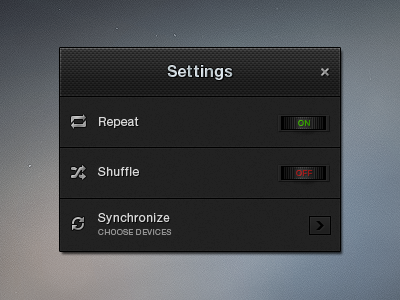
<style>
.page{position:relative;width:400px;height:300px;background:#222222}
.page>*{position:absolute;margin:0}
.t1{font:16px "HelveticaNeue-Bold";letter-spacing:0.02em;color:#ced6dc}
.t2{font:12px "HelveticaNeue-Roman";letter-spacing:0.06em;color:#d8d8d8}
.t3{font:8px "HelveticaNeue-Roman";letter-spacing:0.02em;color:#37a100}
.t4{font:12px "HelveticaNeue-Roman";letter-spacing:0.02em;color:#d8d8d8}
.t5{font:8px "HelveticaNeue-Roman";letter-spacing:0.02em;color:#8a1616}
.t6{font:12px "HelveticaNeue-Roman";letter-spacing:0.04em;color:#d8d8d8}
.t7{font:8px "HelveticaNeue-Roman";letter-spacing:0.02em;color:#929292;text-transform:uppercase}
</style>
<div class="page">
<p class="t1" style="left:167px;top:65px;width:66px;height:15px">Settings</p>
<p class="t2" style="left:99px;top:117px;width:40px;height:11px">Repeat</p>
<p class="t3" style="left:298px;top:120px;width:12px;height:6px">ON</p>
<p class="t4" style="left:98px;top:167px;width:41px;height:9px">Shuffle</p>
<p class="t5" style="left:296px;top:170px;width:17px;height:6px">OFF</p>
<p class="t6" style="left:98px;top:213px;width:72px;height:11px">Synchronize</p>
<p class="t7" style="left:98px;top:229px;width:74px;height:6px">Choose Devices</p>
</div>
